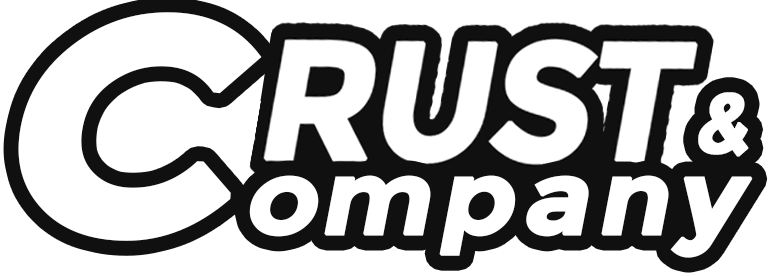
<style>
.page{position:relative;width:768px;height:276px;background:#ffffff}
.page>*{position:absolute;margin:0}
.t1{font:103.8px "Montserrat-Bold";letter-spacing:0.04em;color:#ffffff;font-weight:bold;font-style:italic;scale:1.09 1}
.t2{font:304.1px "Montserrat-Bold";color:#ffffff;font-weight:bold;font-style:italic;scale:1.09 1}
.t3{font:103.8px "Montserrat-Bold";color:#ffffff;font-weight:bold;font-style:italic;scale:1.09 1}
.t4{font:84.9px "Montserrat-Bold";letter-spacing:0.04em;color:#ffffff;font-weight:bold;font-style:italic;scale:0.92 1}
</style>
<div class="page">
<p class="t1" style="left:18px;top:12px;width:735px;height:246px"><span class="t2">C</span><span class="t3">o</span>mpany</p>
<p class="t4" style="left:698px;top:92px;width:51px;height:65px">&amp;</p>
</div>
